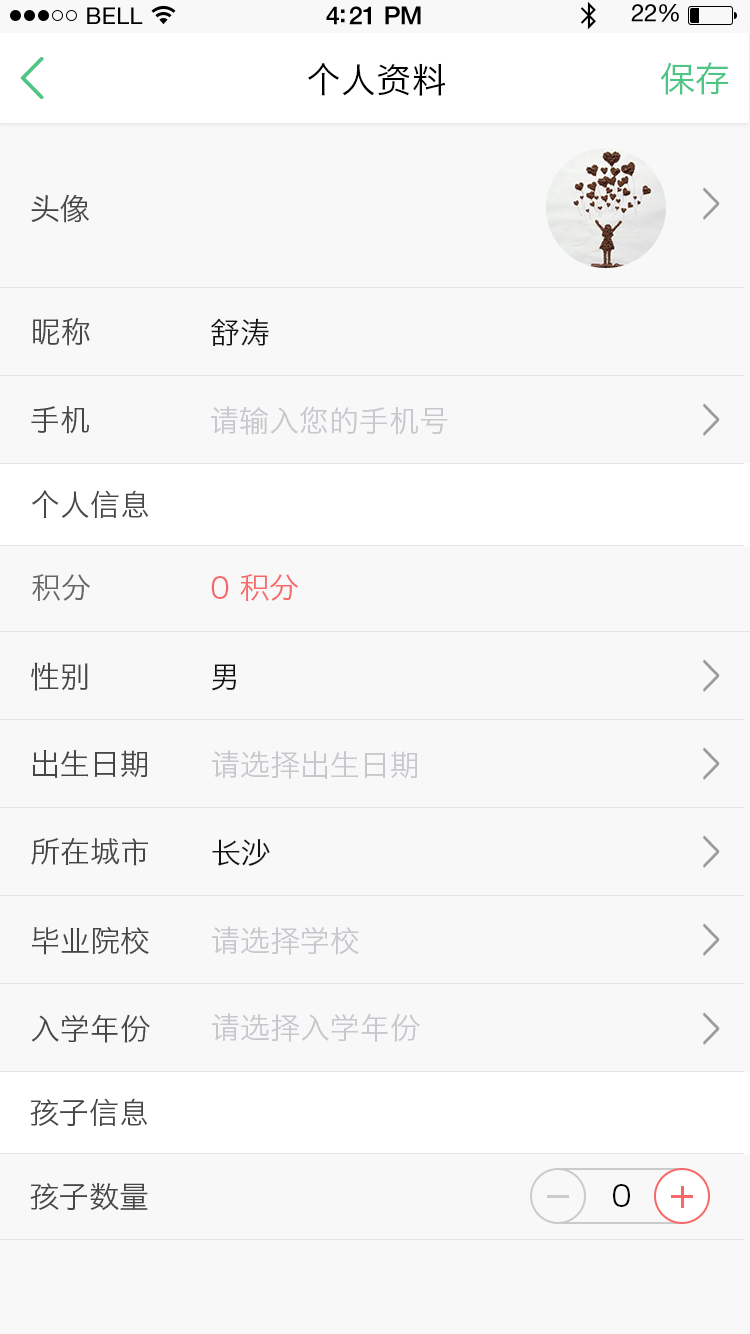
<style>
.page{position:relative;width:750px;height:1334px;background:#f8f8f8}
.page>*{position:absolute;margin:0}
.t1{font:25px "HelveticaNeue-Medium";letter-spacing:-0.02em;color:#000000}
.t2{font:24px "HelveticaNeue";letter-spacing:-0.02em;color:#000000}
.t3{font:23px "HelveticaNeue";letter-spacing:0.02em;color:#000000}
.t4{font:57.9px "YouYuan";color:#4ec585;font-weight:bold}
.t5{font:35px "HiraginoSansGB-W3";color:#000000}
.t6{font:35px "HiraginoSansGB-W3";color:#4ec585}
.t7{font:30px "HiraginoSansGB-W3";color:#464646}
.t8{font:72px "DFYuanLightGB";color:#9c9c9c;scale:0.65 1}
.t9{font:30px "HiraginoSansGB-W3";color:#111111}
.t10{font:30px "HiraginoSansGB-W3";color:#c7c7cd}
.t11{font:30px "HiraginoSansGB-W3";color:#666666}
.t12{font:30px "HiraginoSansGB-W3";color:#f76968}
.t13{font:30px "HiraginoSansGB-W3";color:#000000}
</style>
<div class="page">
<p class="t1" style="left:326px;top:6px;width:95px;height:19px">4:21 PM</p>
<p class="t2" style="left:631px;top:4px;width:48px;height:18px">22%</p>
<p class="t3" style="left:87px;top:7px;width:56px;height:17px">BELL</p>
<p class="t4" style="left:20px;top:57px;width:24px;height:42px">&lt;</p>
<p class="t5" style="left:308px;top:62px;width:137px;height:34px">个人资料</p>
<p class="t6" style="left:660px;top:62px;width:69px;height:33px">保存</p>
<p class="t7" style="left:31px;top:194px;width:58px;height:29px">头像</p>
<p class="t8" style="left:703px;top:187px;width:17px;height:33px">&gt;</p>
<p class="t7" style="left:33px;top:317px;width:57px;height:29px">昵称</p>
<p class="t9" style="left:211px;top:318px;width:58px;height:28px">舒涛</p>
<p class="t7" style="left:31px;top:406px;width:58px;height:28px">手机</p>
<p class="t10" style="left:211px;top:406px;width:237px;height:29px">请输入您的手机号</p>
<p class="t8" style="left:703px;top:403px;width:17px;height:33px">&gt;</p>
<p class="t7" style="left:32px;top:490px;width:117px;height:28px">个人信息</p>
<p class="t11" style="left:32px;top:574px;width:59px;height:27px">积分</p>
<p class="t12" style="left:211px;top:574px;width:88px;height:27px">0 积分</p>
<p class="t7" style="left:31px;top:662px;width:57px;height:29px">性别</p>
<p class="t9" style="left:211px;top:664px;width:25px;height:27px">男</p>
<p class="t8" style="left:703px;top:659px;width:17px;height:33px">&gt;</p>
<p class="t7" style="left:32px;top:750px;width:115px;height:28px">出生日期</p>
<p class="t10" style="left:212px;top:750px;width:205px;height:29px">请选择出生日期</p>
<p class="t8" style="left:703px;top:747px;width:17px;height:33px">&gt;</p>
<p class="t7" style="left:31px;top:838px;width:117px;height:28px">所在城市</p>
<p class="t9" style="left:212px;top:839px;width:58px;height:27px">长沙</p>
<p class="t8" style="left:703px;top:835px;width:17px;height:33px">&gt;</p>
<p class="t7" style="left:32px;top:926px;width:117px;height:29px">毕业院校</p>
<p class="t10" style="left:212px;top:926px;width:147px;height:29px">请选择学校</p>
<p class="t8" style="left:703px;top:923px;width:17px;height:33px">&gt;</p>
<p class="t7" style="left:31px;top:1014px;width:119px;height:29px">入学年份</p>
<p class="t10" style="left:212px;top:1013px;width:208px;height:29px">请选择入学年份</p>
<p class="t8" style="left:703px;top:1012px;width:17px;height:33px">&gt;</p>
<p class="t7" style="left:30px;top:1098px;width:118px;height:28px">孩子信息</p>
<p class="t7" style="left:30px;top:1183px;width:118px;height:28px">孩子数量</p>
<p class="t13" style="left:613px;top:1184px;width:17px;height:23px">0</p>
</div>
